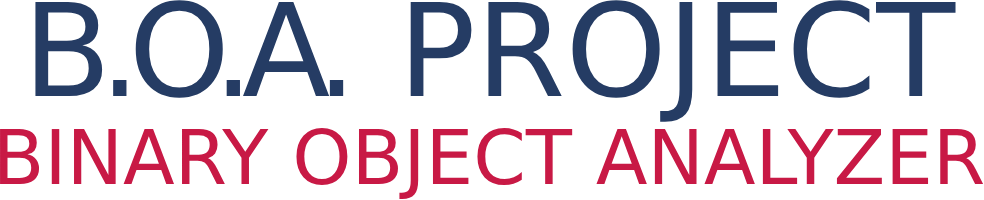
<style>
.page{position:relative;width:984px;height:200px;background:#ffffff}
.page>*{position:absolute;margin:0}
.t1{font:128.9px "DejaVuSans";color:#253c64}
.t2{font:128.9px "DejaVuSans";letter-spacing:-0.092em;color:#253c64}
.t3{font:75.4px "DejaVuSans";color:#c81945}
</style>
<div class="page">
<p class="t1" style="left:35px;top:0px;width:921px;height:122px"><span class="t2">B.O.A. </span>PROJECT</p>
<p class="t3" style="left:0px;top:128px;width:983px;height:71px">BINARY OBJECT ANALYZER</p>
</div>
